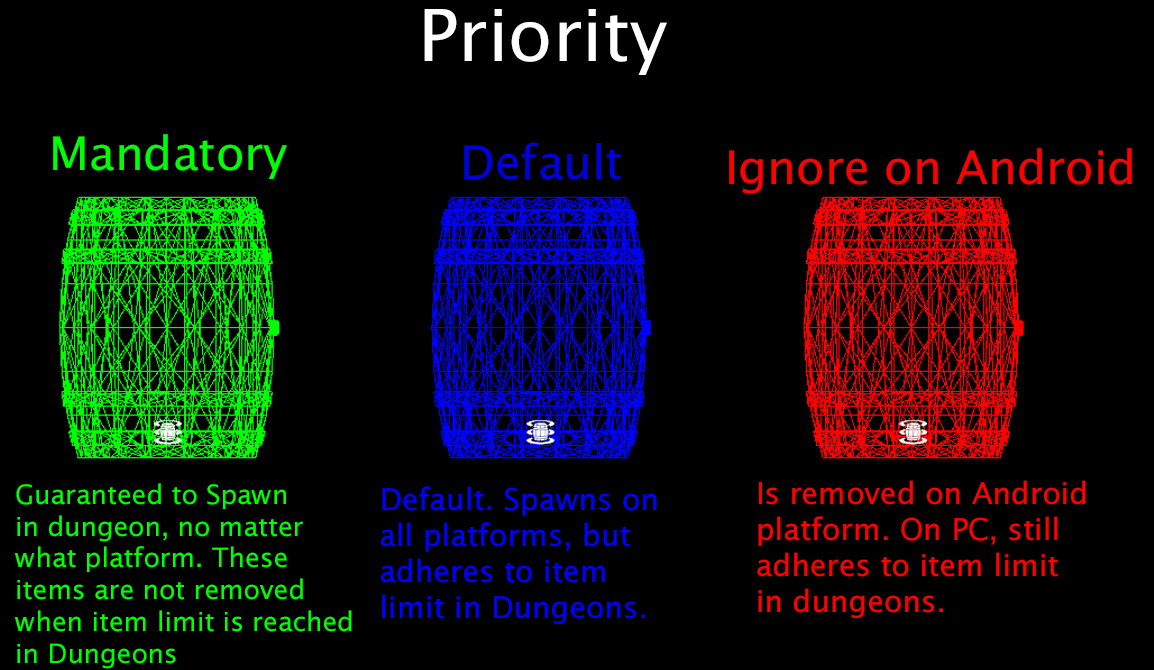
<style>
.page{position:relative;width:1154px;height:670px;background:#000000}
.page>*{position:absolute;margin:0}
.t1{font:72px "LucidaSans";color:#ffffff}
.t2{font:46.4px "LucidaSans";color:#00ff00}
.t3{font:46.4px "LucidaSans";color:#0000dc}
.t4{font:46.4px "LucidaSans";color:#ff0000}
.t5{font:26.5px/31.8px "LucidaSans";color:#00ff00}
.t6{font:26.5px/105.9px "LucidaSans";color:#00ff00}
.t7{font:30px/36px "LucidaSans";color:#0000ff}
.t8{font:30px/36px "LucidaSans";color:#ff0000}
</style>
<div class="page">
<p class="t1" style="left:424px;top:9px;width:243px;height:66px">Priority</p>
<p class="t2" style="left:53px;top:134px;width:234px;height:45px">Mandatory</p>
<p class="t3" style="left:464px;top:142px;width:157px;height:38px">Default</p>
<p class="t4" style="left:729px;top:148px;width:403px;height:46px">Ignore on Android</p>
<p class="t5" style="left:15px;top:483px;width:337px;height:186px"><span class="t6">Guaranteed to Spawn</span><br>in dungeon, no matter<br>what platform. These<br>items are not removed<br>when item limit is reached<br>in Dungeons</p>
<p class="t7" style="left:381px;top:486px;width:276px;height:138px">Default. Spawns on<br>all platforms, but<br>adheres to item<br>limit in Dungeons.</p>
<p class="t8" style="left:757px;top:480px;width:329px;height:138px">Is removed on Android<br>platform. On PC, still<br>adheres to item limit<br>in dungeons.</p>
</div>
